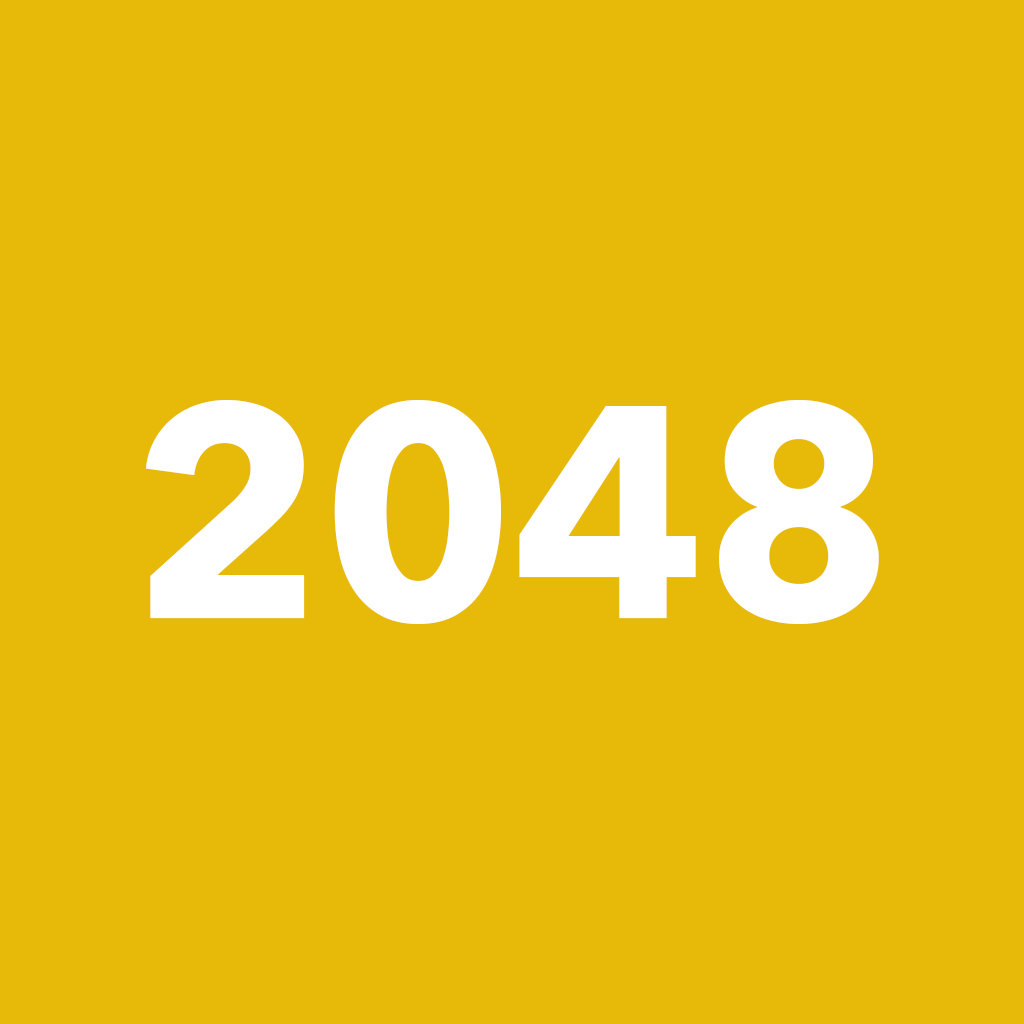
<style>
.page{position:relative;width:1024px;height:1024px;background:#e7ba09}
.page>*{position:absolute;margin:0}
.t1{font:300px "AvenirNext-Bold";letter-spacing:-0.01em;color:#ffffff;text-transform:uppercase}
</style>
<div class="page">
<p class="t1" style="left:145px;top:400px;width:734px;height:224px">2048</p>
</div>
